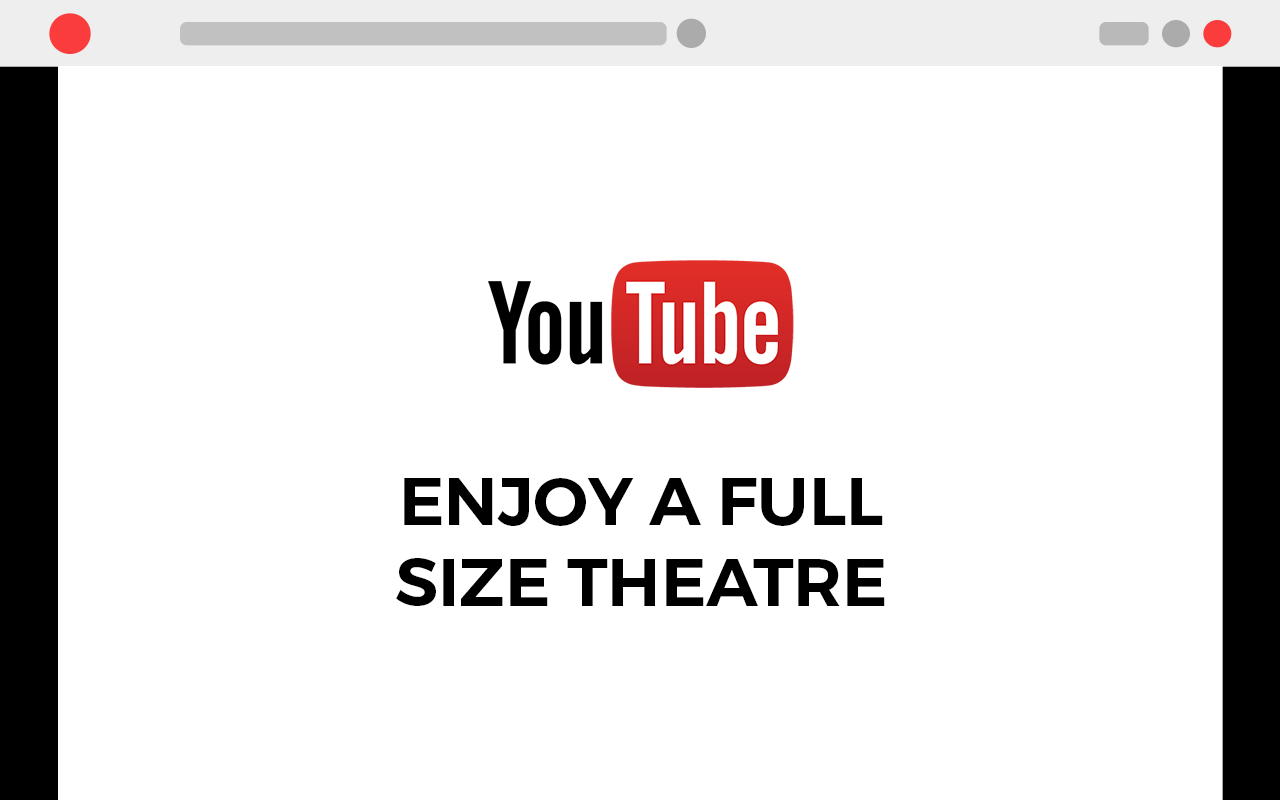
<style>
.page{position:relative;width:1280px;height:800px;background:#ffffff}
.page>*{position:absolute;margin:0}
.t1{font:67.7px "Montserrat-SemiBold";color:#000000;text-transform:uppercase}
</style>
<div class="page">
<p class="t1" style="left:396px;top:478px;width:489px;height:128px;text-align:center">Enjoy a full<br>size theatre</p>
</div>
